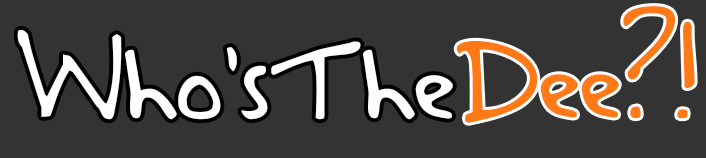
<style>
.page{position:relative;width:706px;height:158px;background:#333333}
.page>*{position:absolute;margin:0}
.t1{font:110px "ASafePlacetoFall";color:#ff7916}
.t2{font:110px "ASafePlacetoFall";color:#ffffff}
.t3{font:110px "ASafePlacetoFall";color:#000000}
</style>
<div class="page">
<p class="t1" style="left:456px;top:6px;width:239px;height:117px">Dee?!</p>
<p class="t2" style="left:17px;top:30px;width:436px;height:90px">Who’sThe<span class="t3"> D</span></p>
</div>
